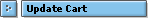
<style>
.page{position:relative;width:148px;height:18px;background:#86c4ec}
.page>*{position:absolute;margin:0}
.t1{font:9px "Verdana-Bold";color:#000000}
</style>
<div class="page">
<p class="t1" style="left:27px;top:4px;width:60px;height:10px">Update Cart</p>
</div>
